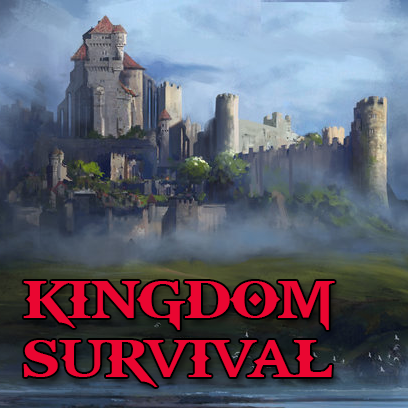
<style>
.page{position:relative;width:408px;height:408px}
.page>*{position:absolute;margin:0}
.t1{font:58.3px/58.3px "GodOfWar";color:#ea0631;text-transform:uppercase}
</style>
<div class="page">
<p class="t1" style="left:23px;top:281px;width:312px;height:106px">Kingdom<br>Survival</p>
</div>
